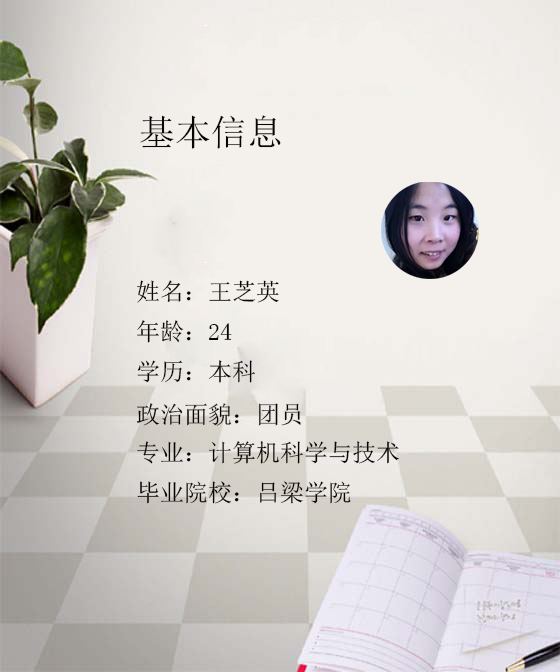
<style>
.page{position:relative;width:560px;height:672px;background:#f4f1ec}
.page>*{position:absolute;margin:0}
.t1{font:36px "SimSun";color:#050505}
.t2{font:24px/2.9px "SimSun";color:#050505}
</style>
<div class="page">
<p class="t1" style="left:140px;top:115px;width:141px;height:34px">基本信息</p>
<p class="t2" style="left:136px;top:280px;width:263px;height:224px">姓名：王芝英<br><br><br><br><br><br><br><br><br><br><br><br><br><br>年龄：24<br><br><br><br><br><br><br><br><br><br><br><br><br><br>学历：本科<br><br><br><br><br><br><br><br><br><br><br><br><br><br><br>政治面貌：团员<br><br><br><br><br><br><br><br><br><br><br><br><br>专业：计算机科学与技术<br><br><br><br><br><br><br><br><br><br><br><br><br><br>毕业院校：吕梁学院</p>
</div>
